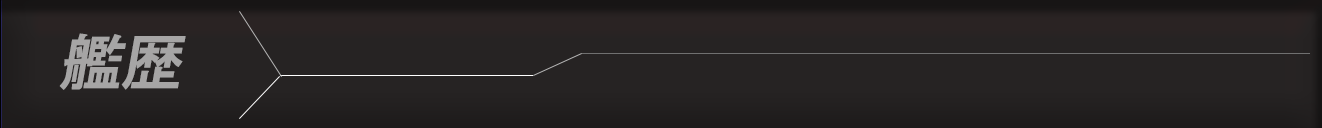
<style>
.page{position:relative;width:1322px;height:128px;background:#262323}
.page>*{position:absolute;margin:0}
.t1{font:61px "HGPGothicE";color:#a6a5a5;font-style:italic}
</style>
<div class="page">
<p class="t1" style="left:59px;top:33px;width:127px;height:57px">艦歴</p>
</div>
